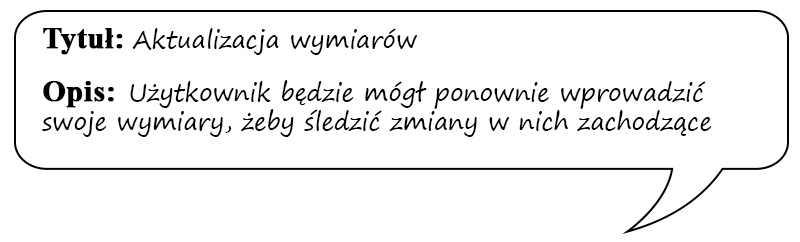
<style>
.page{position:relative;width:800px;height:242px;background:#ffffff}
.page>*{position:absolute;margin:0}
.t1{font:24px "SegoePrint";color:#000000}
.t2{font:30px "TimesNewRomanPS-BoldMT";color:#000000;font-weight:bold}
</style>
<div class="page">
<p class="t1" style="left:42px;top:28px;width:670px;height:109px"><span class="t2">Tytuł: </span>Aktualizacja wymiarów<br><br><span class="t2">Opis:  </span>Użytkownik będzie mógł ponownie wprowadzić swoje wymiary, żeby śledzić zmiany w nich zachodzące</p>
</div>
